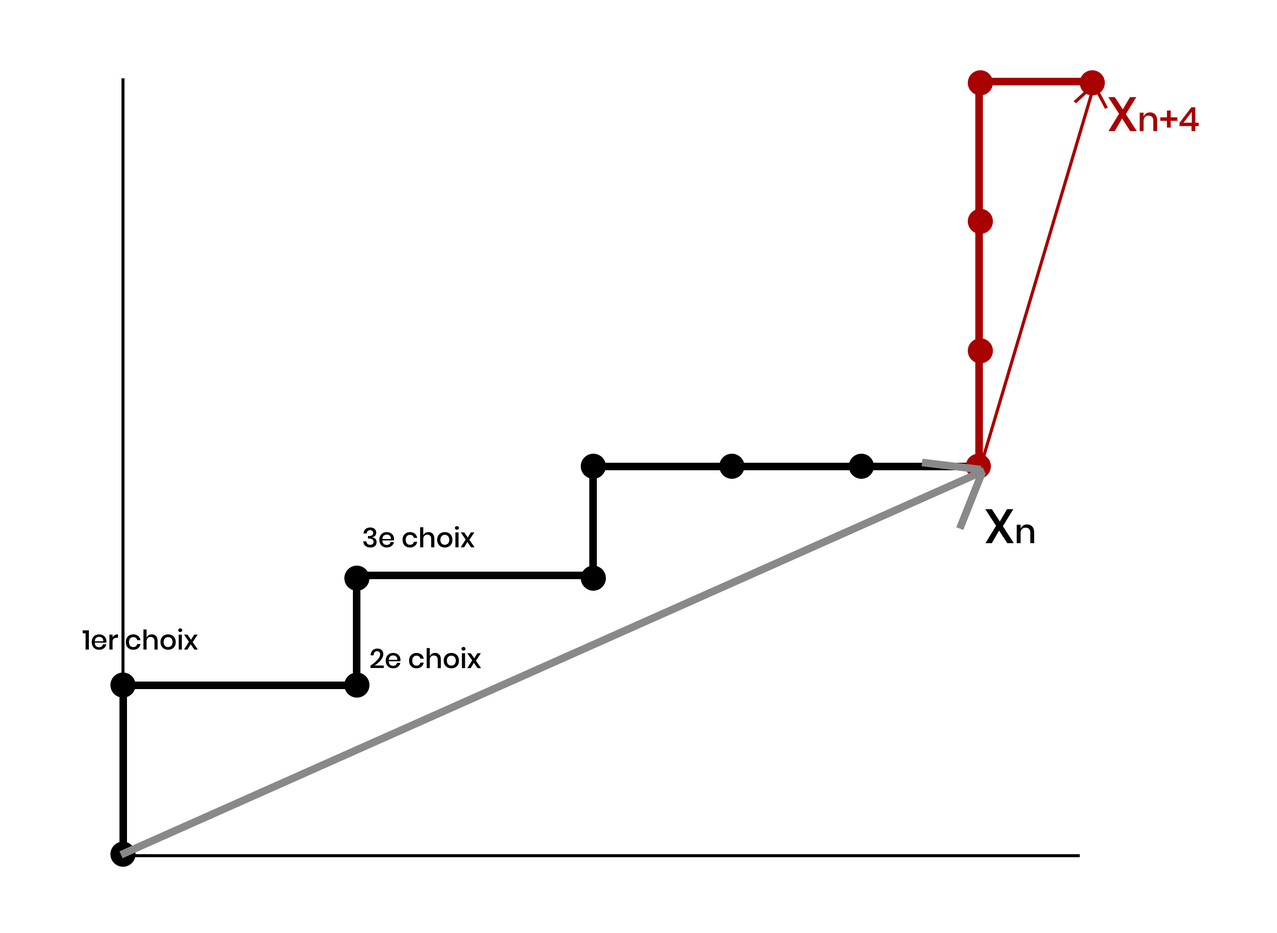
<style>
.page{position:relative;width:1277px;height:933px;background:#ffffff}
.page>*{position:absolute;margin:0}
.t1{font:33.4px "Poppins-Medium";color:#a90000}
.t2{font:48.3px "Poppins-Medium";color:#a90000}
.t3{font:48.3px "Poppins-Medium";color:#000000}
.t4{font:33.4px "Poppins-Medium";color:#000000}
.t5{font:27.2px "Poppins-Medium";color:#000000}
</style>
<div class="page">
<p class="t1" style="left:1109px;top:97px;width:90px;height:35px"><span class="t2">X</span>n+4</p>
<p class="t3" style="left:986px;top:509px;width:49px;height:35px">X<span class="t4">n</span></p>
<p class="t5" style="left:363px;top:526px;width:112px;height:22px">3e choix</p>
<p class="t5" style="left:82px;top:629px;width:116px;height:21px">1er choix</p>
<p class="t5" style="left:371px;top:647px;width:111px;height:22px">2e choix</p>
</div>
